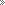
<style>
.page{position:relative;width:5px;height:5px;background:#ffffff}
.page>*{position:absolute;margin:0}
.t1{font:13px "Georgia";color:#666666}
</style>
<div class="page">
<p class="t1" style="left:0px;top:0px;width:5px;height:5px">»</p>
</div>
